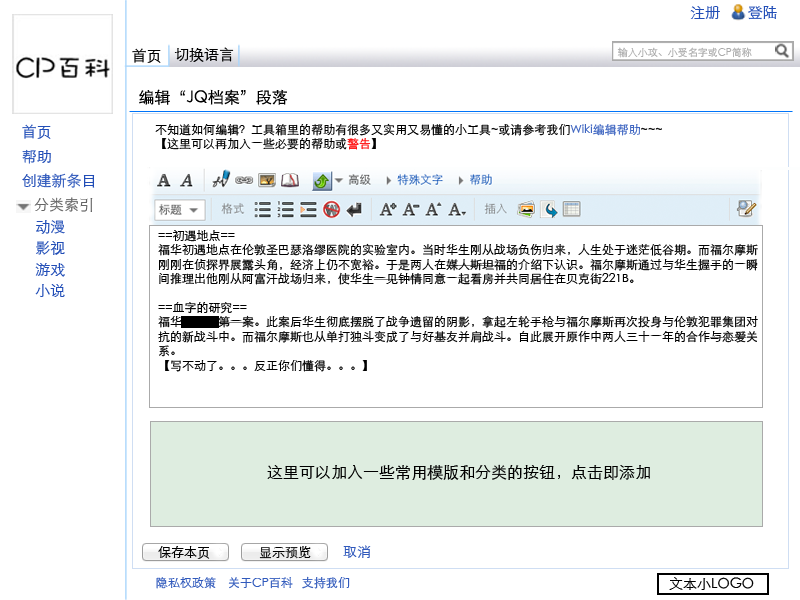
<style>
.page{position:relative;width:800px;height:600px;background:#ffffff}
.page>*{position:absolute;margin:0}
.t1{font:15px "STHeitiSC-Light";color:#224eb7}
.t2{font:15px "STHeitiSC-Light";color:#000000}
.t3{font:10px "STHeitiSC-Light";color:#aaaaaa}
.t4{font:16px "STHeitiSC-Light";color:#000000}
.t5{font:12px "STHeitiSC-Light";color:#000000}
.t6{font:12px "STHeitiSC-Light";color:#3f66c1}
.t7{font:12px "STHeitiSC-Light";color:#ff0000}
.t8{font:15px "STHeitiSC-Light";color:#656565}
.t9{font:14px "STHeitiSC-Light";color:#3059bc}
.t10{font:13px "STHeitiSC-Light";color:#000000}
.t11{font:12px "STHeitiSC-Light";color:#315abc}
.t12{font:14px "STHeitiSC-Light";color:#000000}
</style>
<div class="page">
<p class="t1" style="left:690px;top:6px;width:30px;height:13px">注册</p>
<p class="t1" style="left:748px;top:6px;width:29px;height:14px">登陆</p>
<p class="t2" style="left:132px;top:48px;width:29px;height:15px">首页</p>
<p class="t2" style="left:174px;top:47px;width:60px;height:15px">切换语言</p>
<p class="t3" style="left:617px;top:47px;width:135px;height:11px">输入小攻、小受名字或CP简称</p>
<p class="t4" style="left:139px;top:89px;width:149px;height:16px">编辑“JQ档案”段落</p>
<p class="t1" style="left:22px;top:124px;width:29px;height:15px">首页</p>
<p class="t5" style="left:155px;top:123px;width:507px;height:27px">不知道如何编辑？工具箱里的帮助有很多又实用又易懂的小工具~或请参考我们<span class="t6">Wiki编辑帮助</span>~~~<br>【这里可以再加入一些必要的帮助或<span class="t7">警告</span>】</p>
<p class="t1" style="left:22px;top:149px;width:29px;height:15px">帮助</p>
<p class="t1" style="left:22px;top:173px;width:73px;height:15px">创建新条目</p>
<p class="t8" style="left:34px;top:197px;width:59px;height:15px">分类索引</p>
<p class="t1" style="left:36px;top:220px;width:29px;height:14px">动漫</p>
<p class="t5" style="left:158px;top:230px;width:600px;height:142px">==初遇地点==<br>福华初遇地点在伦敦圣巴瑟洛缪医院的实验室内。当时华生刚从战场负伤归来，人生处于迷茫低谷期。而福尔摩斯<br>刚刚在侦探界展露头角，经济上仍不宽裕。于是两人在媒人斯坦福的介绍下认识。福尔摩斯通过与华生握手的一瞬<br>间推理出他刚从阿富汗战场归来，使华生一见钟情同意一起看房并共同居住在贝克街221B。<br><br>==血字的研究==<br>福华同居后第一案。此案后华生彻底摆脱了战争遗留的阴影，拿起左轮手枪与福尔摩斯再次投身与伦敦犯罪集团对<br>抗的新战斗中。而福尔摩斯也从单打独斗变成了与好基友并肩战斗。自此展开原作中两人三十一年的合作与恋爱关<br>系。<br>【写不动了。。。反正你们懂得。。。】</p>
<p class="t1" style="left:36px;top:241px;width:29px;height:14px">影视</p>
<p class="t1" style="left:35px;top:263px;width:30px;height:14px">游戏</p>
<p class="t1" style="left:35px;top:284px;width:30px;height:13px">小说</p>
<p class="t4" style="left:267px;top:464px;width:383px;height:16px">这里可以加入一些常用模版和分类的按钮，点击即添加</p>
<p class="t9" style="left:343px;top:545px;width:28px;height:13px">取消</p>
<p class="t10" style="left:158px;top:546px;width:52px;height:13px">保存本页</p>
<p class="t10" style="left:259px;top:546px;width:52px;height:13px">显示预览</p>
<p class="t11" style="left:156px;top:576px;width:194px;height:13px">隐私权政策    关于CP百科   支持我们</p>
<p class="t12" style="left:669px;top:577px;width:85px;height:13px">文本小LOGO</p>
</div>
